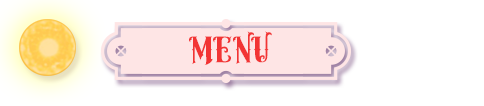
<style>
.page{position:relative;width:484px;height:106px;background:#ffffff}
.page>*{position:absolute;margin:0}
.t1{font:41.7px "Moyers";color:#f23434}
</style>
<div class="page">
<p class="t1" style="left:189px;top:31px;width:83px;height:34px">MENU</p>
</div>
